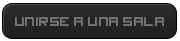
<style>
.page{position:relative;width:180px;height:41px}
.page>*{position:absolute;margin:0}
.t1{font:14px "imagine-font";color:#797878}
</style>
<div class="page">
<p class="t1" style="left:15px;top:17px;width:149px;height:9px">UNIRSE A UNA SALA</p>
</div>
